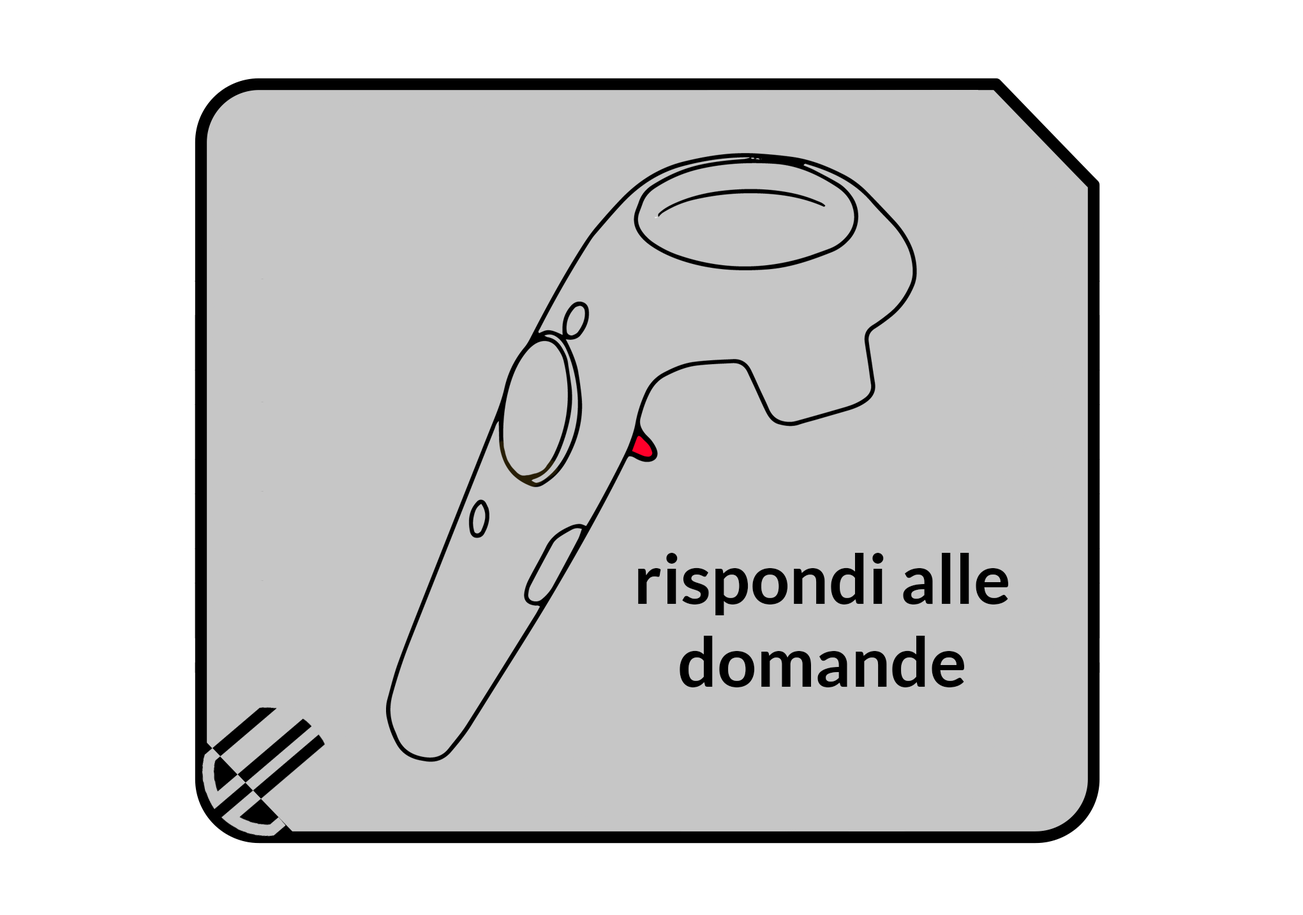
<style>
.page{position:relative;width:1303px;height:915px;background:#c6c6c6}
.page>*{position:absolute;margin:0}
.t1{font:69.1px "Lato-Bold";color:#000000}
</style>
<div class="page">
<p class="t1" style="left:638px;top:553px;width:370px;height:135px;text-align:center">rispondi alle domande</p>
</div>
